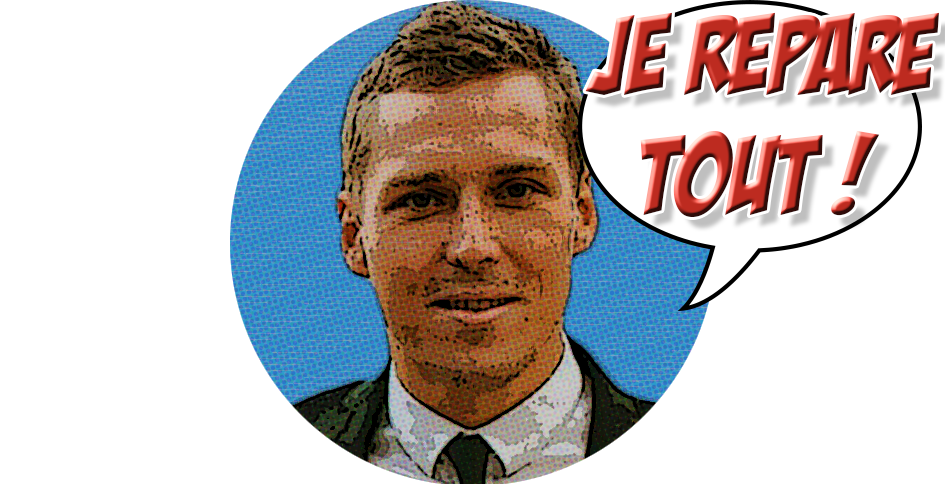
<style>
.page{position:relative;width:945px;height:484px;background:#ffffff}
.page>*{position:absolute;margin:0}
.t1{font:108.3px/40px "BadaBoomBB"}
</style>
<div class="page">
<p class="t1" style="left:585px;top:12px;width:354px;height:205px;text-align:center">Je repare <br><br><br>TOUT !</p>
</div>
